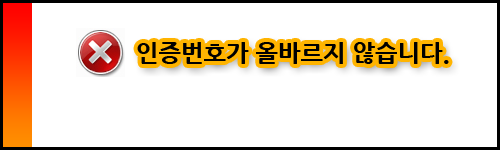
<style>
.page{position:relative;width:500px;height:150px;background:#ffffff}
.page>*{position:absolute;margin:0}
.t1{font:24px "NanumGothicExtraBold";color:#000000}
</style>
<div class="page">
<p class="t1" style="left:137px;top:42px;width:312px;height:22px">인증번호가 올바르지 않습니다.</p>
</div>
